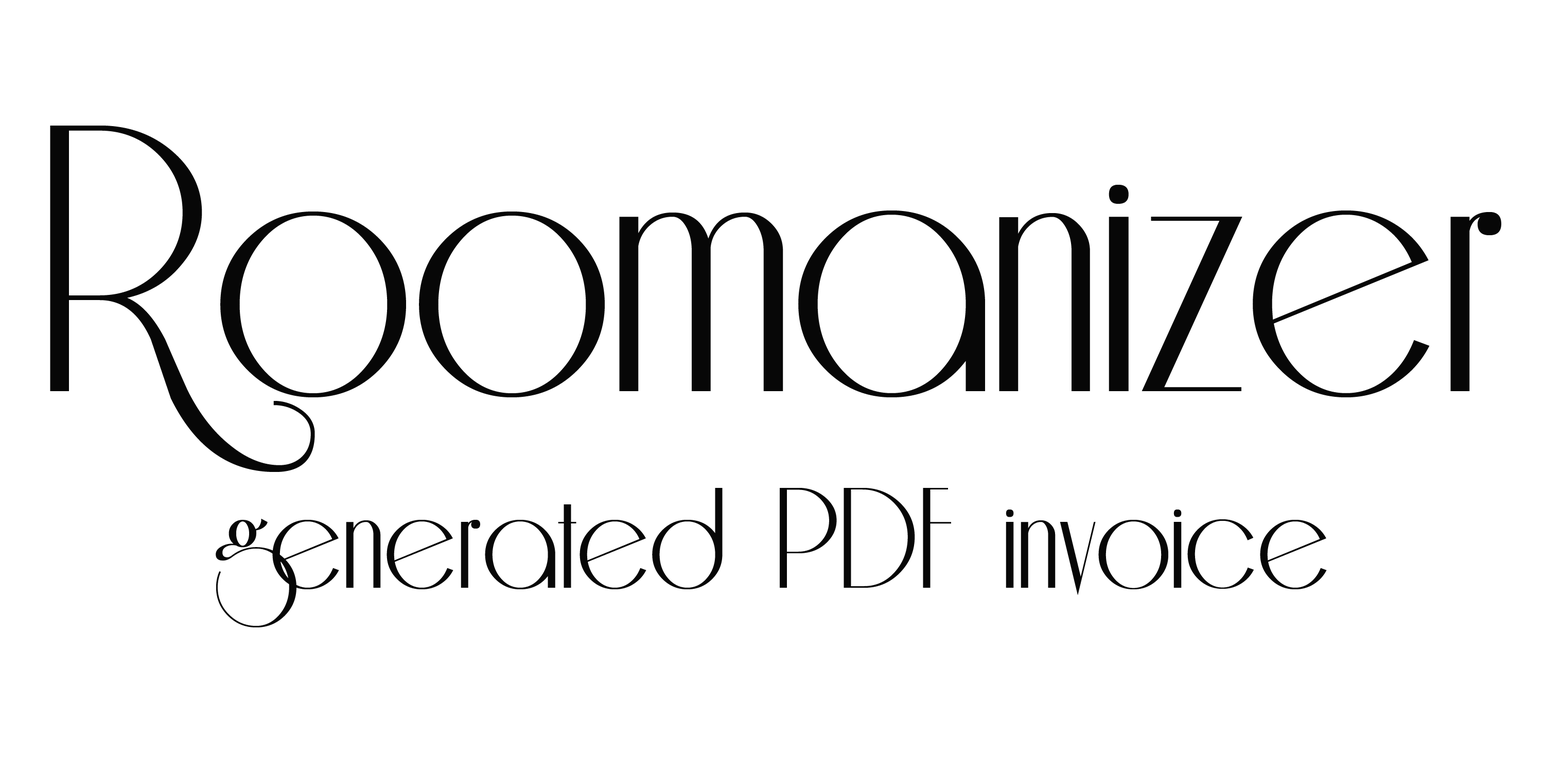
<style>
.page{position:relative;width:1544px;height:772px;background:#ffffff}
.page>*{position:absolute;margin:0}
.t1{font:163.4px "Riesling";color:#070707}
.t2{font:435.8px "Riesling";color:#070707}
</style>
<div class="page">
<p class="t1" style="left:50px;top:126px;width:1452px;height:502px;text-align:center"><span class="t2">Roomanizer</span><br>generated PDF invoice<br><span class="t2">vyv</span></p>
</div>
